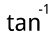
<style>
.page{position:relative;width:53px;height:41px;background:#ffffff}
.page>*{position:absolute;margin:0}
.t1{font:13.4px "DroidSans"}
.t2{font:23.7px "DroidSans";color:#000000}
</style>
<div class="page">
<p class="t1" style="left:39px;top:4px;width:9px;height:10px">-1</p>
<p class="t2" style="left:6px;top:15px;width:34px;height:16px">tan</p>
</div>
